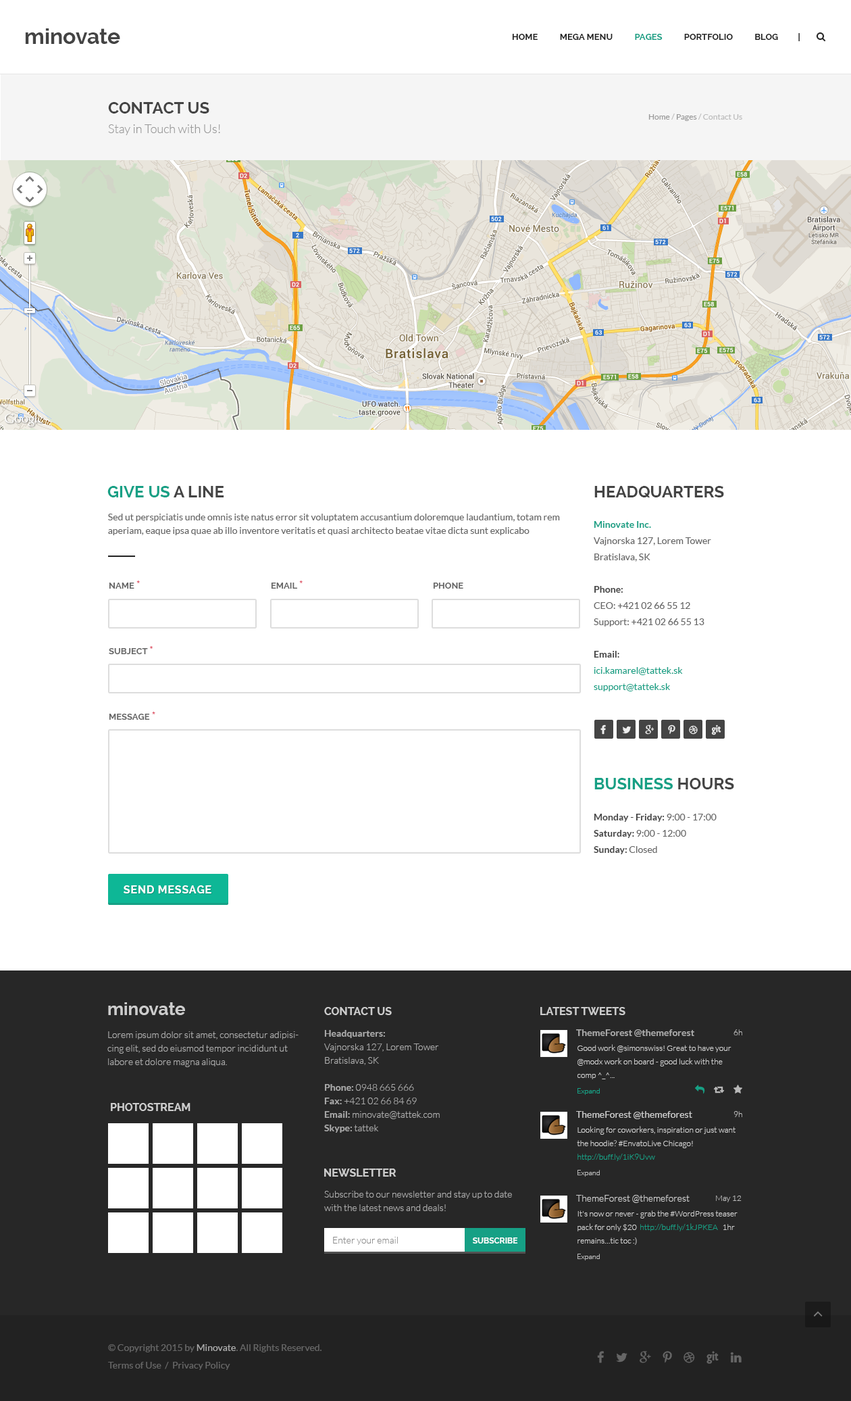
<style>
.page{position:relative;width:851px;height:1401px;background:#ffffff}
.page>*{position:absolute;margin:0}
.t1{font:21.6px "Raleway-Bold";color:#444444}
.t2{font:16.2px "Raleway-Bold";color:#444444;text-transform:uppercase}
.t3{font:8.1px "Lato-Regular";color:#bbbbbb}
.t4{font:8.1px "Lato-Regular";color:#999999}
.t5{font:12.2px "Lato-Light";color:#999999}
.t6{font:16.2px "Raleway-Bold";color:#16a085;text-transform:uppercase}
.t7{font:9.5px/13.5px "Lato-Regular";color:#666666}
.t8{font:9.5px/16.2px "Lato-Regular";color:#666666}
.t9{font:9.5px/16.2px "Lato-Bold";color:#16a085}
.t10{font:9.5px/16.2px "Lato-Bold";color:#444444}
.t11{font:9.5px/16.2px "Lato-Regular";color:#16a085}
.t12{font:8.8px "Raleway-Bold";color:#666666;text-transform:uppercase}
.t13{font:10.8px "Raleway-Bold";color:#e05d6f;text-transform:uppercase}
.t14{font:10.8px "Raleway-Bold";letter-spacing:0.05em;color:#ffffff}
.t15{font:17.6px "Raleway-Bold";color:#cccccc}
.t16{font:10.8px "Raleway-Bold";color:#cccccc;text-transform:uppercase}
.t17{font:9.5px/13.5px "Lato-Light";color:#aaaaaa}
.t18{font:9.5px/13.5px "Lato-Bold";color:#aaaaaa}
.t19{font:9.5px "Lato-Bold";color:#aaaaaa}
.t20{font:8.1px "Lato-Light";color:#b9b9b9}
.t21{font:8.1px/13.5px "Lato-Light";color:#cccccc}
.t22{font:7.4px "Lato-Light";color:#16a085}
.t23{font:9.5px "Lato-Regular";color:#cccccc}
.t24{font:8.1px/13.5px "Lato-Light";color:#16a085}
.t25{font:7.4px "Lato-Light";color:#b6b6b6}
.t26{font:9.5px "Lato-Light";color:#cccccc}
.t27{font:9.5px "Lato-Light";color:#8c8c8c}
.t28{font:8.1px "Raleway-Bold";color:#ffffff;text-transform:uppercase}
.t29{font:9.5px "Lato-Regular";color:#666666}
.t30{font:9.5px "Lato-Regular";color:#aaaaaa}
</style>
<div class="page">
<p class="t1" style="left:25px;top:28px;width:95px;height:16px">minovate</p>
<p class="t2" style="left:108px;top:102px;width:101px;height:12px">Contact Us</p>
<p class="t3" style="left:649px;top:114px;width:94px;height:7px"><span class="t4">Home </span>/<span class="t4"> Pages </span>/ Contact Us</p>
<p class="t5" style="left:108px;top:124px;width:112px;height:11px">Stay in Touch with Us!</p>
<p class="t6" style="left:107px;top:486px;width:117px;height:11px">Give Us <span class="t2">a Line</span></p>
<p class="t2" style="left:595px;top:486px;width:129px;height:11px">HeadQuarters</p>
<p class="t7" style="left:108px;top:514px;width:452px;height:21px">Sed ut perspiciatis unde omnis iste natus error sit voluptatem accusantium doloremque laudantium, totam rem aperiam, eaque ipsa quae ab illo inventore veritatis et quasi architecto beatae vitae dicta sunt explicabo</p>
<p class="t8" style="left:594px;top:521px;width:117px;height:170px"><span class="t9">Minovate Inc.<br></span>Vajnorska 127, Lorem Tower<br>Bratislava, SK<br><br><span class="t10">Phone:<br></span>CEO: +421 02 66 55 12<br>Support: +421 02 66 55 13<br><br><span class="t10">Email:<br></span><span class="t11">ici.kamarel@tattek.sk<br>support@tattek.sk</span></p>
<p class="t12" style="left:109px;top:580px;width:31px;height:9px">Name <span class="t13">*</span></p>
<p class="t12" style="left:271px;top:580px;width:32px;height:9px">Email <span class="t13">*</span></p>
<p class="t12" style="left:433px;top:582px;width:31px;height:7px">Phone</p>
<p class="t12" style="left:109px;top:646px;width:44px;height:8px">Subject <span class="t13">*</span></p>
<p class="t12" style="left:109px;top:711px;width:46px;height:9px">Message <span class="t13">*</span></p>
<p class="t6" style="left:595px;top:778px;width:139px;height:11px">Business <span class="t2">Hours</span></p>
<p class="t10" style="left:594px;top:814px;width:123px;height:40px">Monday - Friday: <span class="t8">9:00 - 17:00<br></span>Saturday: <span class="t8">9:00 - 12:00<br></span>Sunday: <span class="t8">Closed</span></p>
<p class="t14" style="left:124px;top:885px;width:87px;height:8px">SEND MESSAGE</p>
<p class="t15" style="left:108px;top:1002px;width:77px;height:13px">minovate</p>
<p class="t16" style="left:324px;top:1007px;width:68px;height:8px">Contact Us</p>
<p class="t16" style="left:541px;top:1007px;width:85px;height:8px">Latest Tweets</p>
<p class="t17" style="left:107px;top:1031px;width:192px;height:36px">Lorem ipsum dolor sit amet, consectetur adipisicing elit, sed do eiusmod tempor incididunt ut labore et dolore magna aliqua.</p>
<p class="t17" style="left:324px;top:1030px;width:116px;height:102px"><span class="t18">Headquarters:<br></span>Vajnorska 127, Lorem Tower<br>Bratislava, SK<br><br><span class="t18">Phone: </span>0948 665 666<br><span class="t18">Fax: </span>+421 02 66 84 69<br><span class="t18">Email: </span>minovate@tattek.com<br><span class="t18">Skype:</span> tattek</p>
<p class="t19" style="left:576px;top:1029px;width:119px;height:7px">ThemeForest @themeforest</p>
<p class="t20" style="left:734px;top:1029px;width:9px;height:6px">6h</p>
<p class="t21" style="left:577px;top:1044px;width:155px;height:35px">Good work @simonswiss! Great to have your @modx work on board - good luck with the comp ^_^...<br>^Dan</p>
<p class="t22" style="left:578px;top:1088px;width:22px;height:7px">Expand</p>
<p class="t16" style="left:111px;top:1103px;width:80px;height:8px">Photostream</p>
<p class="t23" style="left:576px;top:1111px;width:117px;height:8px">ThemeForest @themeforest</p>
<p class="t20" style="left:734px;top:1111px;width:9px;height:6px">9h</p>
<p class="t21" style="left:577px;top:1126px;width:159px;height:35px">Looking for coworkers, inspiration or just want the hoodie? #EnvatoLive Chicago! <span class="t24">http://buff.ly/1iK9Uvw<br></span>^Dan</p>
<p class="t16" style="left:324px;top:1168px;width:73px;height:8px">Newsletter</p>
<p class="t25" style="left:578px;top:1170px;width:22px;height:6px">Expand</p>
<p class="t17" style="left:324px;top:1191px;width:188px;height:20px">Subscribe to our newsletter and stay up to date with the latest news and deals!</p>
<p class="t26" style="left:576px;top:1195px;width:114px;height:8px">ThemeForest @themeforest</p>
<p class="t20" style="left:716px;top:1195px;width:26px;height:7px">May 12</p>
<p class="t21" style="left:578px;top:1210px;width:160px;height:35px">It's now or never - grab the #WordPress teaser pack for only $20  <span class="t24">http://buff.ly/1kJPKEA</span>   1hr remains…tic toc :)<br>^Dan</p>
<p class="t27" style="left:333px;top:1236px;width:65px;height:9px">Enter your email</p>
<p class="t28" style="left:473px;top:1237px;width:45px;height:6px">Subscribe</p>
<p class="t25" style="left:578px;top:1253px;width:22px;height:7px">Expand</p>
<p class="t29" style="left:108px;top:1344px;width:214px;height:8px">© Copyright 2015 by <span class="t30">Minovate</span>. All Rights Reserved.</p>
<p class="t29" style="left:108px;top:1361px;width:122px;height:9px">Terms of Use  /  Privacy Policy</p>
</div>
